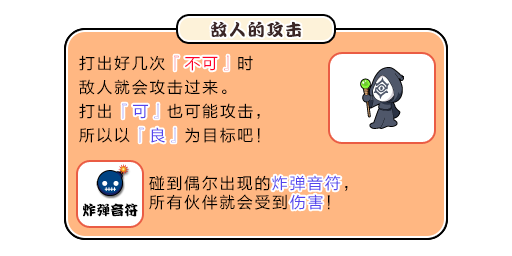
<style>
.page{position:relative;width:512px;height:256px;background:#ffffff}
.page>*{position:absolute;margin:0}
.t1{font:17px "DFPKanTingLiuW9";letter-spacing:0.1em;color:#3b2626}
.t2{font:16px/24px "FZLTHJW--GB1-0";letter-spacing:0.1em;color:#000000}
.t3{font:16px/24px "FZLTHJW--GB1-0";letter-spacing:0.1em;color:#ff002a}
.t4{font:16px/24px "FZLTHJW--GB1-0";letter-spacing:0.1em;color:#5444ed}
.t5{font:16px "FZLTHJW--GB1-0";letter-spacing:0.1em;color:#ff002a}
.t6{font:16px "FZLTHJW--GB1-0";letter-spacing:0.1em;color:#5444ed}
.t7{font:16px/19px "FZLTHJW--GB1-0";letter-spacing:0.1em;color:#000000}
.t8{font:16px/19px "FZLTHJW--GB1-0";letter-spacing:0.1em;color:#5444ed}
.t9{font:14px "DFPKanTingLiuW9";color:#000000}
</style>
<div class="page">
<p class="t1" style="left:211px;top:21px;width:91px;height:17px">敌人的攻击</p>
<p class="t2" style="left:79px;top:55px;width:181px;height:88px">打出好几次<span class="t3">『不可』</span>时<br>敌人就会攻击过来。<br>打出<span class="t4">『可』</span>也可能攻击，<br>所以以<span class="t4">『良』</span>为目标吧！</p>
<p class="t5" style="left:174px;top:55px;width:55px;height:16px">『不可』</p>
<p class="t6" style="left:122px;top:103px;width:37px;height:16px">『可』</p>
<p class="t6" style="left:139px;top:127px;width:37px;height:16px">『良』</p>
<p class="t7" style="left:149px;top:175px;width:199px;height:35px">碰到偶尔出现的<span class="t8">炸弹音符</span>，<br>所有伙伴就会受到<span class="t8">伤害</span>！</p>
<p class="t6" style="left:272px;top:175px;width:69px;height:16px">炸弹音符</p>
<p class="t6" style="left:290px;top:194px;width:33px;height:16px">伤害</p>
<p class="t9" style="left:83px;top:203px;width:55px;height:14px">炸弹音符</p>
</div>
